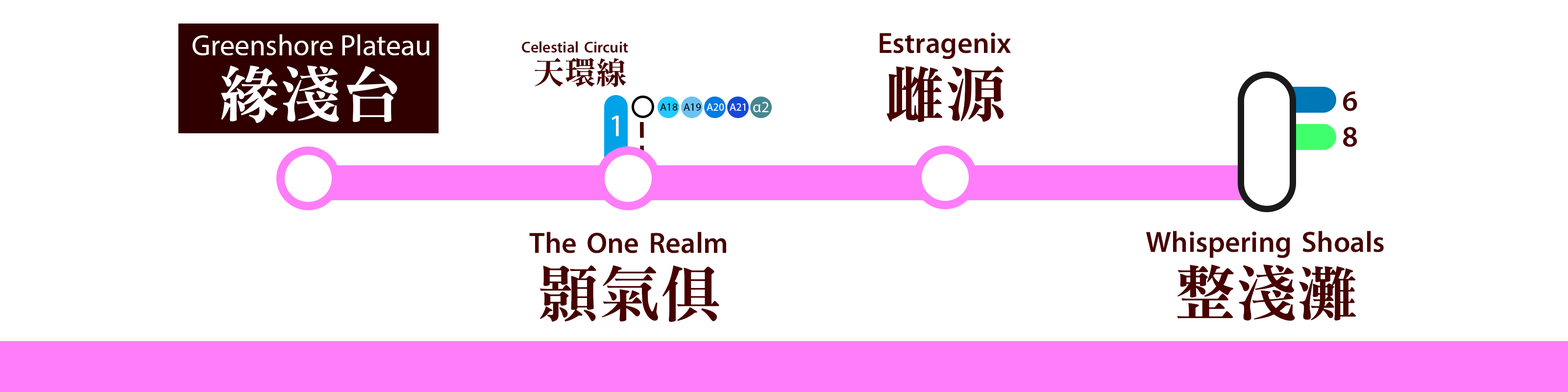
<style>
.page{position:relative;width:1568px;height:392px;background:#ffffff}
.page>*{position:absolute;margin:0}
.t1{font:29.4px "MyriadPro-Regular";color:#ffffff}
.t2{font:15.7px "MTR-Sung";color:#480000}
.t3{font:29.4px "MTR-Sung";color:#480000}
.t4{font:61.2px "MTR-Sung";color:#ffffff}
.t5{font:31.4px "MTR-Sung";color:#480000}
.t6{font:61.2px "MTR-Sung";color:#480000}
.t7{font:15.4px "MyriadPro-Regular";color:#ffffff}
.t8{font:29.6px "MTR-Sung";color:#480000}
.t9{font:10.9px "MyriadPro-Regular";color:#000000}
.t10{font:10.9px "MyriadPro-Regular";color:#ffffff}
.t11{font:31.4px "MyriadPro-Regular";color:#ffffff}
</style>
<div class="page">
<p class="t1" style="left:193px;top:34px;width:237px;height:21px">Greenshore Plateau</p>
<p class="t2" style="left:522px;top:41px;width:106px;height:12px">Celestial Circuit</p>
<p class="t3" style="left:880px;top:32px;width:131px;height:27px">Estragenix</p>
<p class="t4" style="left:221px;top:65px;width:176px;height:58px">緣淺台</p>
<p class="t5" style="left:535px;top:58px;width:91px;height:29px">天環線</p>
<p class="t6" style="left:886px;top:66px;width:118px;height:56px">雌源</p>
<p class="t7" style="left:753px;top:102px;width:16px;height:10px">α2</p>
<p class="t8" style="left:1343px;top:91px;width:14px;height:56px">6<br>8</p>
<p class="t9" style="left:660px;top:103px;width:18px;height:8px">A18</p>
<p class="t9" style="left:684px;top:103px;width:17px;height:8px">A19</p>
<p class="t10" style="left:707px;top:103px;width:17px;height:8px">A20</p>
<p class="t10" style="left:730px;top:103px;width:15px;height:8px">A21</p>
<p class="t11" style="left:612px;top:116px;width:7px;height:20px">1</p>
<p class="t3" style="left:529px;top:232px;width:197px;height:21px">The One Realm</p>
<p class="t3" style="left:1146px;top:231px;width:238px;height:27px">Whispering Shoals</p>
<p class="t6" style="left:539px;top:265px;width:180px;height:57px">顥氣俱</p>
<p class="t6" style="left:1177px;top:264px;width:179px;height:57px">整淺灘</p>
</div>
